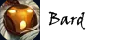
<style>
.page{position:relative;width:140px;height:40px;background:#ffffff}
.page>*{position:absolute;margin:0}
.t1{font:12px "VinerHandITC";color:#000000}
</style>
<div class="page">
<p class="t1" style="left:48px;top:11px;width:38px;height:19px">Bard</p>
</div>
